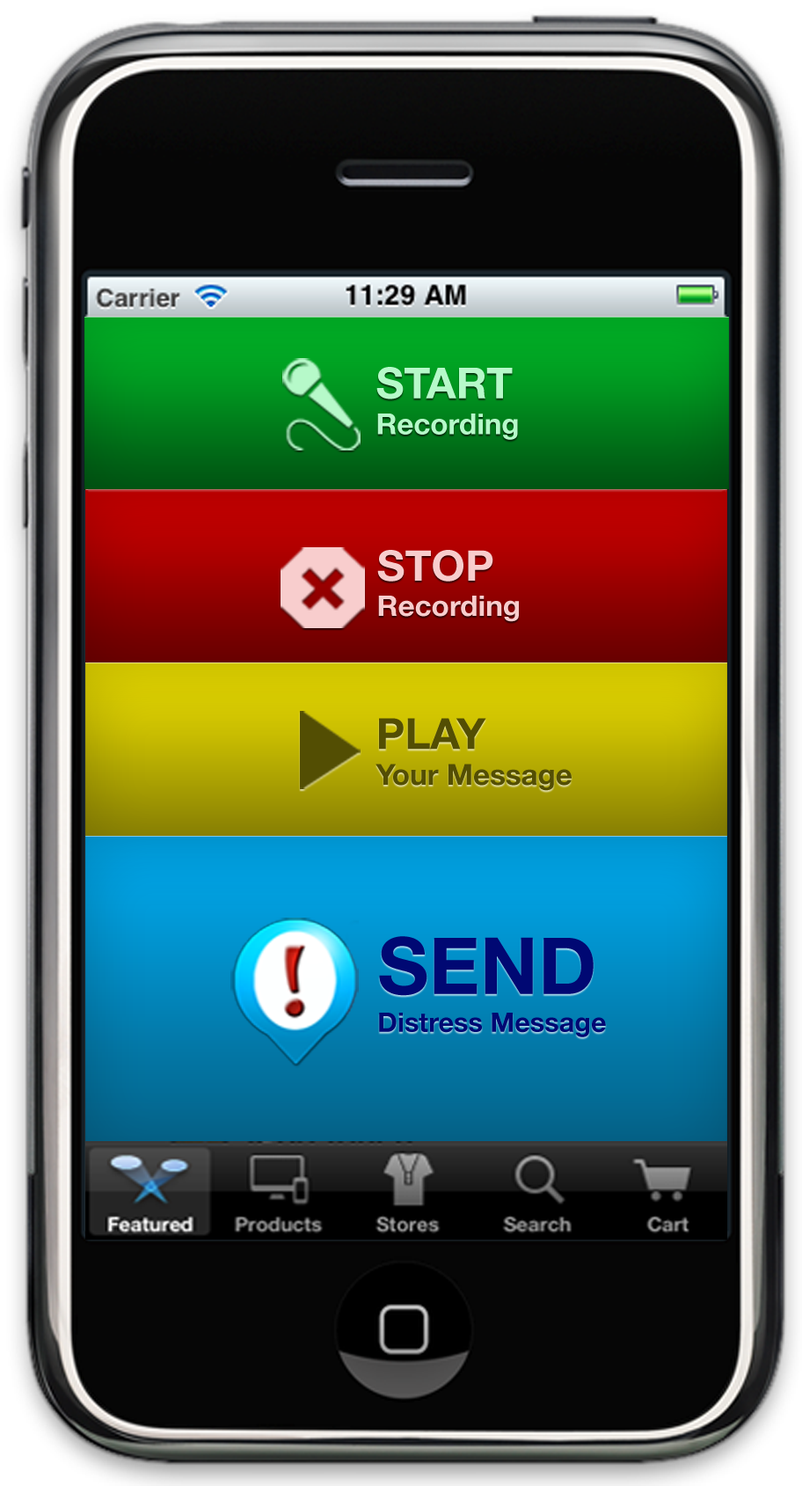
<style>
.page{position:relative;width:802px;height:1486px}
.page>*{position:absolute;margin:0}
.t1{font:42.8px "HelveticaNeue-Bold";color:#b6f9c9}
.t2{font:28.9px "HelveticaNeue-Bold";color:#b6f9c9}
.t3{font:42.2px "HelveticaNeue-Bold";color:#f8cdcd}
.t4{font:28.5px "HelveticaNeue-Bold";color:#f8cdcd}
.t5{font:42.8px "HelveticaNeue-Bold";color:#534e03}
.t6{font:28.9px "HelveticaNeue-Bold";color:#534e03}
.t7{font:78.7px "HelveticaNeue-Bold";color:#000873}
.t8{font:26.9px "HelveticaNeue-Bold";color:#000873}
</style>
<div class="page">
<p class="t1" style="left:377px;top:367px;width:136px;height:32px">START</p>
<p class="t2" style="left:377px;top:414px;width:141px;height:26px">Recording</p>
<p class="t3" style="left:377px;top:550px;width:117px;height:32px">STOP</p>
<p class="t4" style="left:378px;top:596px;width:141px;height:26px">Recording</p>
<p class="t5" style="left:379px;top:718px;width:108px;height:32px">PLAY</p>
<p class="t6" style="left:376px;top:764px;width:196px;height:27px">Your Message</p>
<p class="t7" style="left:379px;top:936px;width:215px;height:60px">SEND</p>
<p class="t8" style="left:379px;top:1013px;width:227px;height:24px">Distress Message</p>
</div>
